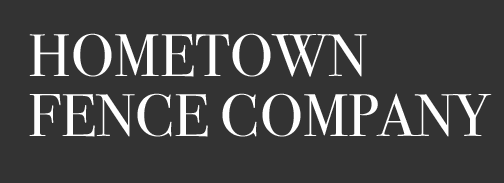
<style>
.page{position:relative;width:504px;height:183px;background:#333333}
.page>*{position:absolute;margin:0}
.t1{font:60px/60px "BodoniSvtyTwoITCTT-Book";color:#ffffff;text-transform:uppercase}
</style>
<div class="page">
<p class="t1" style="left:29px;top:33px;width:463px;height:104px">Hometown<br>Fence Company</p>
</div>
